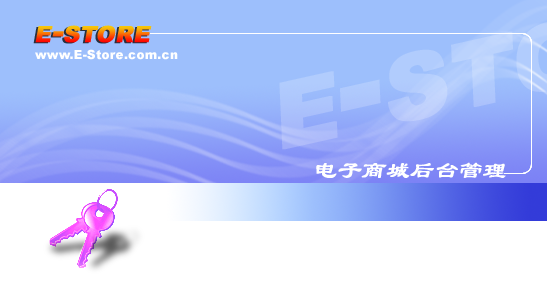
<style>
.page{position:relative;width:547px;height:294px;background:#ffffff}
.page>*{position:absolute;margin:0}
.t1{font:32px "Arial-Black";font-variant:small-caps;font-weight:bold;font-style:italic}
.t2{font:12.5px "Arial-Black";color:#ffffff}
.t3{font:12.5px "Arial-Black";color:#ffffff;text-transform:uppercase}
.t4{font:23.5px "LiSu";color:#ffffff;font-variant:small-caps;font-weight:bold;font-style:italic}
</style>
<div class="page">
<p class="t1" style="left:35px;top:25px;width:117px;height:18px">e-store</p>
<p class="t2" style="left:35px;top:49px;width:143px;height:11px">www.<span class="t3">e</span>-<span class="t3">s</span>tore.com.cn</p>
<p class="t4" style="left:316px;top:162px;width:190px;height:16px">电子商城后台管理</p>
</div>
